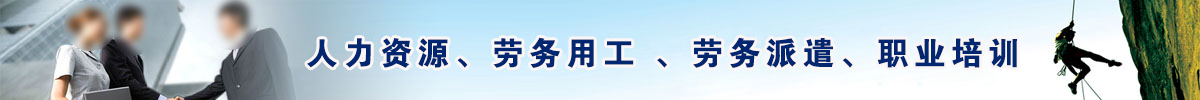
<style>
.page{position:relative;width:1200px;height:100px}
.page>*{position:absolute;margin:0}
.t1{font:32px/27.2px "FZDHTJW--GB1-0";letter-spacing:0.16em;color:#022670}
.t2{font:32px/27.2px "AdobeHeitiStd-Regular";letter-spacing:0.16em;color:#022670}
</style>
<div class="page">
<p class="t1" style="left:307px;top:37px;width:711px;height:31px">人力资源、劳务用工 、劳务派遣、职业培训<br><span class="t2">职业培训</span></p>
</div>
